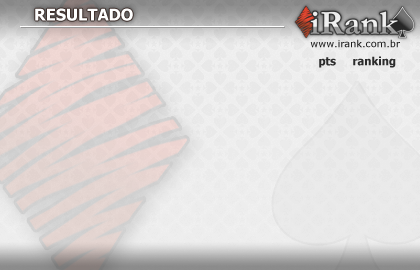
<style>
.page{position:relative;width:420px;height:270px}
.page>*{position:absolute;margin:0}
.t1{font:16.3px "Tahoma-Bold";color:#ffffff}
.t2{font:9.8px "Verdana";color:#1d1d1d}
.t3{font:11.4px "Tahoma-Bold";color:#171717}
</style>
<div class="page">
<p class="t1" style="left:35px;top:8px;width:98px;height:13px">RESULTADO</p>
<p class="t2" style="left:310px;top:39px;width:90px;height:9px">www.irank.com.br</p>
<p class="t3" style="left:319px;top:57px;width:17px;height:11px;opacity:0.9">pts</p>
<p class="t3" style="left:353px;top:56px;width:43px;height:12px;opacity:0.9">ranking</p>
</div>
